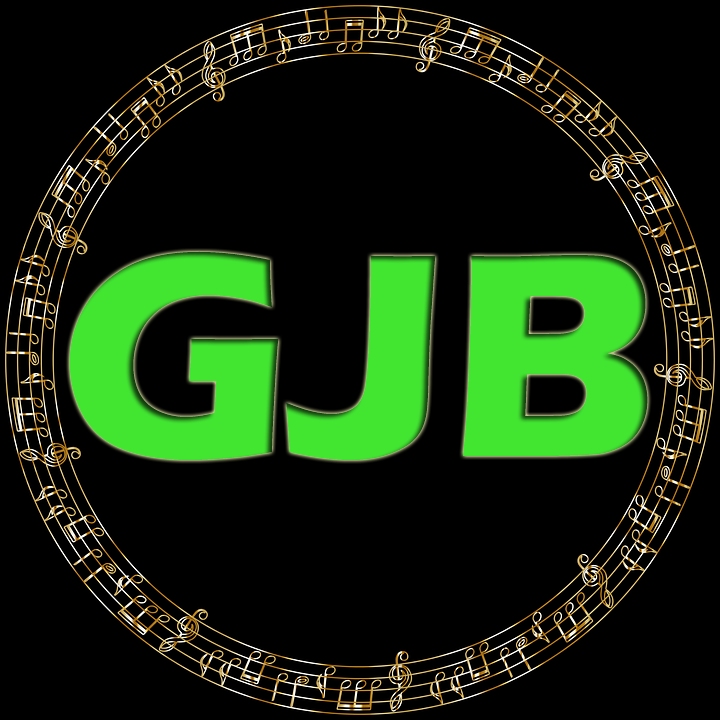
<style>
.page{position:relative;width:720px;height:720px;background:#000000}
.page>*{position:absolute;margin:0}
.t1{font:300px "ErasITC-Bold";color:#42e631}
</style>
<div class="page">
<p class="t1" style="left:69px;top:251px;width:579px;height:209px">GJB</p>
</div>
